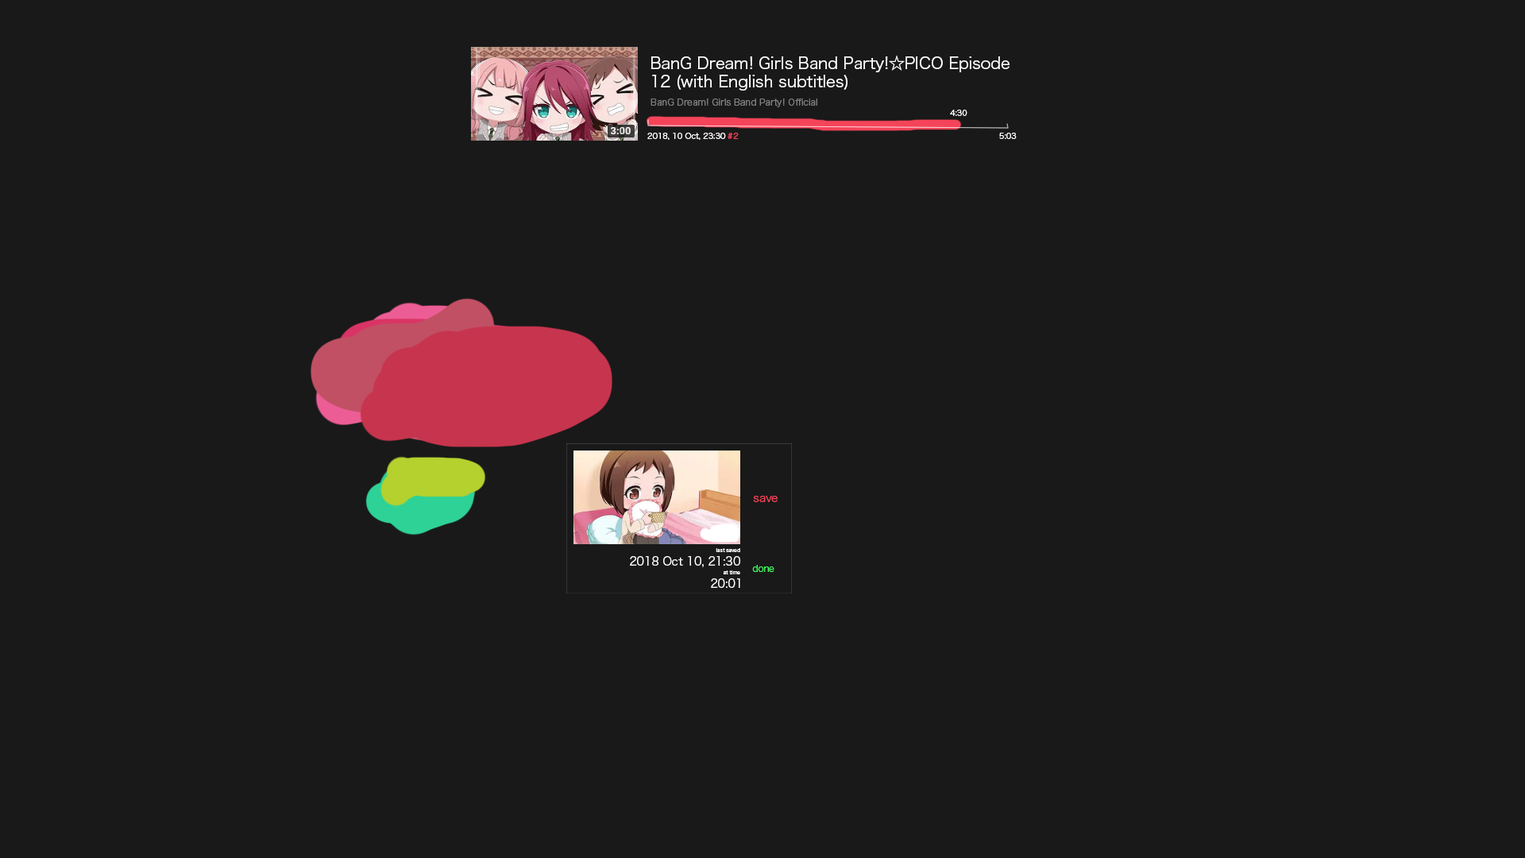
<style>
.page{position:relative;width:1525px;height:858px;background:#191919}
.page>*{position:absolute;margin:0}
.t1{font:16px/17.9px "HiraKakuPro-W3";letter-spacing:-0.01em;color:#ffffff}
.t2{font:9px "HiraKakuPro-W3";letter-spacing:-0.01em;color:#808080}
.t3{font:7.9px "HiraKakuPro-W3";letter-spacing:-0.01em;color:#ffffff}
.t4{font:7.9px "HiraKakuPro-W3";letter-spacing:-0.01em;color:#f54459}
.t5{font:11.5px "HiraKakuPro-W3";letter-spacing:-0.01em;color:#f54459}
.t6{font:11.5px "HiraKakuPro-W3";letter-spacing:-0.01em;color:#ffffff}
.t7{font:5px "HiraKakuPro-W3";letter-spacing:-0.01em;color:#ffffff}
.t8{font:9px "HiraKakuPro-W3";letter-spacing:-0.01em;color:#44f561}
</style>
<div class="page">
<p class="t1" style="left:651px;top:55px;width:359px;height:36px">BanG Dream! Girls Band Party!☆PICO Episode <br>12 (with English subtitles)</p>
<p class="t2" style="left:651px;top:98px;width:166px;height:9px">BanG Dream! Girls Band Party! Official</p>
<p class="t3" style="left:950px;top:110px;width:17px;height:6px">4:30</p>
<p class="t3" style="left:647px;top:133px;width:92px;height:7px">2018, 10 Oct, 23:30 <span class="t4">#2</span></p>
<p class="t3" style="left:999px;top:133px;width:18px;height:6px">5:03</p>
<p class="t5" style="left:753px;top:496px;width:25px;height:6px">save</p>
<p class="t6" style="left:630px;top:556px;width:110px;height:11px">2018 Oct 10, 21:30</p>
<p class="t7" style="left:716px;top:548px;width:24px;height:4px">last saved</p>
<p class="t8" style="left:752px;top:565px;width:22px;height:7px">done</p>
<p class="t6" style="left:711px;top:578px;width:29px;height:10px">20:01</p>
<p class="t7" style="left:723px;top:570px;width:17px;height:4px">at time</p>
</div>
